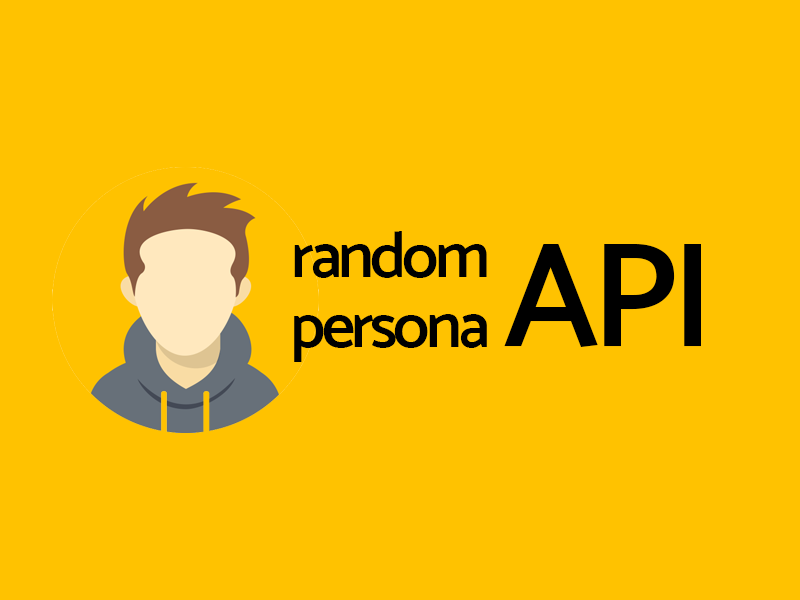
<style>
.page{position:relative;width:800px;height:600px;background:#ffc200}
.page>*{position:absolute;margin:0}
.t1{font:65px/70px "MoskSemi-Bold600";letter-spacing:-0.06em;color:#000000}
.t2{font:150px "MoskSemi-Bold600";letter-spacing:-0.05em;color:#000000}
</style>
<div class="page">
<p class="t1" style="left:294px;top:231px;width:193px;height:131px;text-align:center">random<br>persona</p>
<p class="t2" style="left:504px;top:244px;width:197px;height:103px">API</p>
</div>
